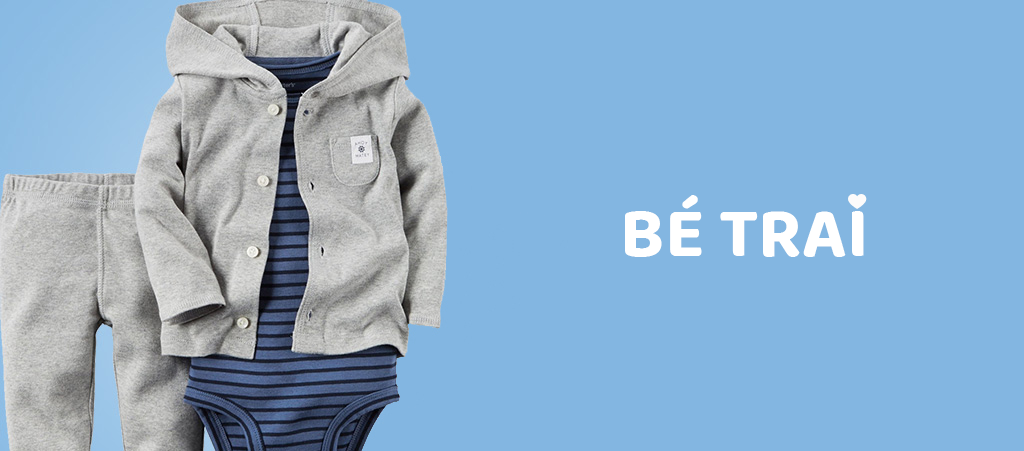
<style>
.page{position:relative;width:1024px;height:451px;background:#83b6e1}
.page>*{position:absolute;margin:0}
.t1{font:72px "BalooTammudu2-Bold";color:#ffffff}
</style>
<div class="page">
<p class="t1" style="left:625px;top:195px;width:239px;height:62px">BÉ TRAI</p>
</div>
